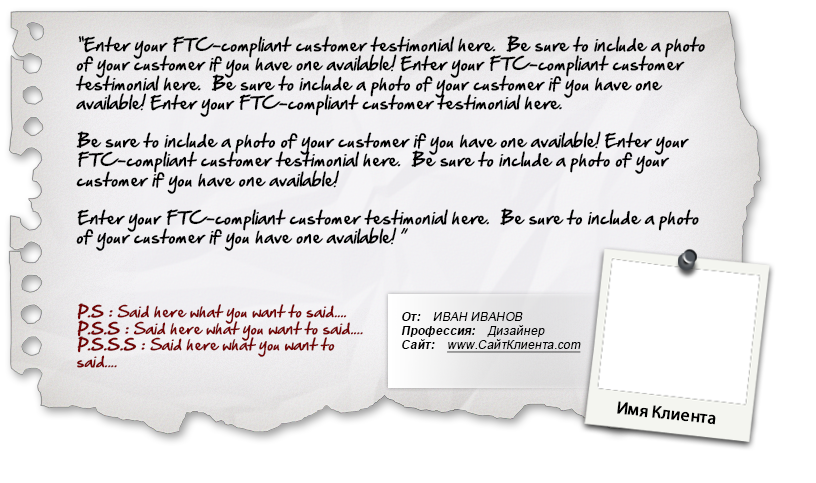
<style>
.page{position:relative;width:816px;height:483px;background:#ffffff}
.page>*{position:absolute;margin:0}
.t1{font:16px "HandOfSean";letter-spacing:0.01em;color:#000000;font-style:italic}
.t2{font:14px "HandOfSean";letter-spacing:0.01em;color:#720404;font-style:italic}
.t3{font:14px "HandOfSean";letter-spacing:0.01em;color:#720404;font-weight:bold;font-style:italic}
.t4{font:12px "ArialMT";letter-spacing:0.01em;color:#000000;font-style:italic;text-decoration:underline}
.t5{font:12px "Arial-BoldMT";letter-spacing:0.01em;color:#000000;font-style:italic}
.t6{font:12px "ArialMT";letter-spacing:0.01em;color:#000000;text-transform:uppercase;font-style:italic}
.t7{font:12px "ArialMT";letter-spacing:0.01em;color:#000000;font-style:italic}
.t8{font:17.3px "MyriadPro-Regular";color:#000000;font-weight:bold}
</style>
<div class="page">
<p class="t1" style="left:75px;top:35px;width:630px;height:216px">“Enter your FTC-compliant customer testimonial here.  Be sure to include a photo of your customer if you have one available! Enter your FTC-compliant customer testimonial here.  Be sure to include a photo of your customer if you have one available! Enter your FTC-compliant customer testimonial here.  <br><br>Be sure to include a photo of your customer if you have one available! Enter your FTC-compliant customer testimonial here.  Be sure to include a photo of your customer if you have one available! <br><br>Enter your FTC-compliant customer testimonial here.  Be sure to include a photo of your customer if you have one available! ”</p>
<p class="t2" style="left:77px;top:303px;width:286px;height:65px"><span class="t3">P.S : </span>Said here what you want to said....<br><span class="t3">P.S.S : </span>Said here what you want to said....<br><span class="t3">P.S.S.S : </span>Said here what you want to said....</p>
<p class="t4" style="left:401px;top:312px;width:180px;height:41px"><span class="t5">От:    </span><span class="t6">Иван Иванов<br></span><span class="t5">Профессия:</span><span class="t7">    Дизайнер<br></span><span class="t5">Сайт:    </span>www.СайтКлиента.com</p>
<p class="t8" style="left:617px;top:401px;width:99px;height:24px;rotate:7deg">Имя Клиента</p>
</div>
